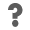
<style>
.page{position:relative;width:30px;height:30px;background:#ffffff}
.page>*{position:absolute;margin:0}
.t1{font:30px "Futura-Bold";letter-spacing:-0.02em;color:#5c5c5c;scale:0.9 1}
</style>
<div class="page">
<p class="t1" style="left:8px;top:3px;width:15px;height:24px">?</p>
</div>
